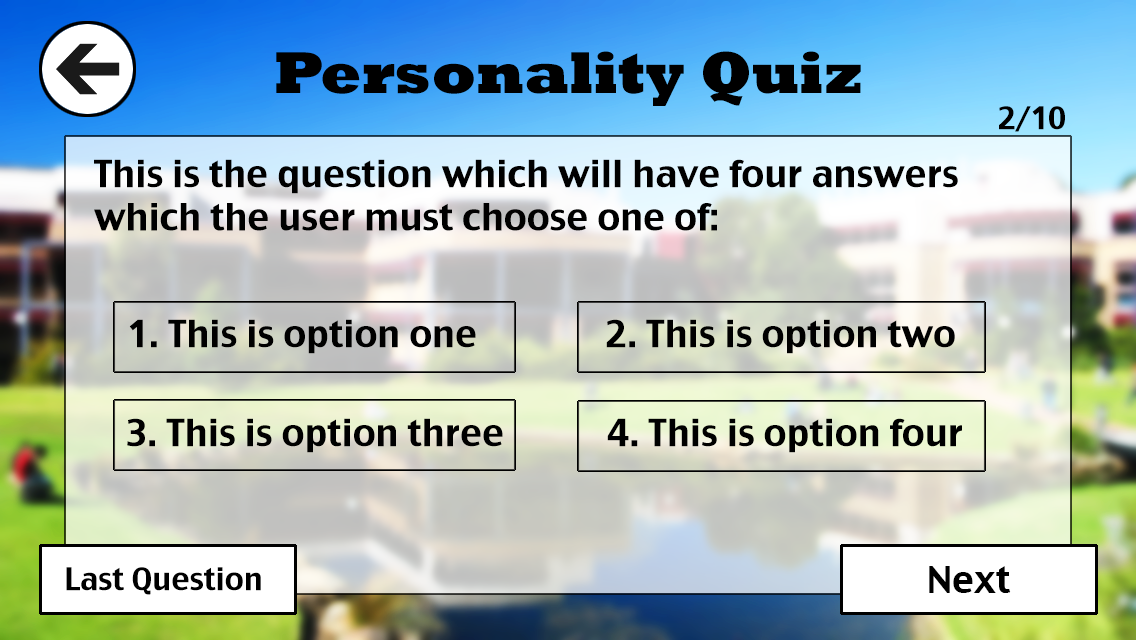
<style>
.page{position:relative;width:1136px;height:640px}
.page>*{position:absolute;margin:0}
.t1{font:60px "Rockwell-ExtraBold";color:#000000}
.t2{font:30px "CharcoalCY";color:#000000}
.t3{font:36px "CharcoalCY";color:#000000}
</style>
<div class="page">
<p class="t1" style="left:276px;top:51px;width:585px;height:55px">Personality Quiz</p>
<p class="t2" style="left:999px;top:106px;width:66px;height:26px">2/10</p>
<p class="t3" style="left:94px;top:159px;width:864px;height:72px">This is the question which will have four answers <br>which the user must choose one of:</p>
<p class="t3" style="left:129px;top:319px;width:347px;height:35px">1. This is option one</p>
<p class="t3" style="left:606px;top:319px;width:349px;height:35px">2. This is option two</p>
<p class="t3" style="left:127px;top:418px;width:376px;height:35px">3. This is option three</p>
<p class="t3" style="left:607px;top:418px;width:355px;height:35px">4. This is option four</p>
<p class="t2" style="left:66px;top:567px;width:195px;height:28px">Last Question</p>
<p class="t3" style="left:929px;top:566px;width:82px;height:27px">Next</p>
</div>
